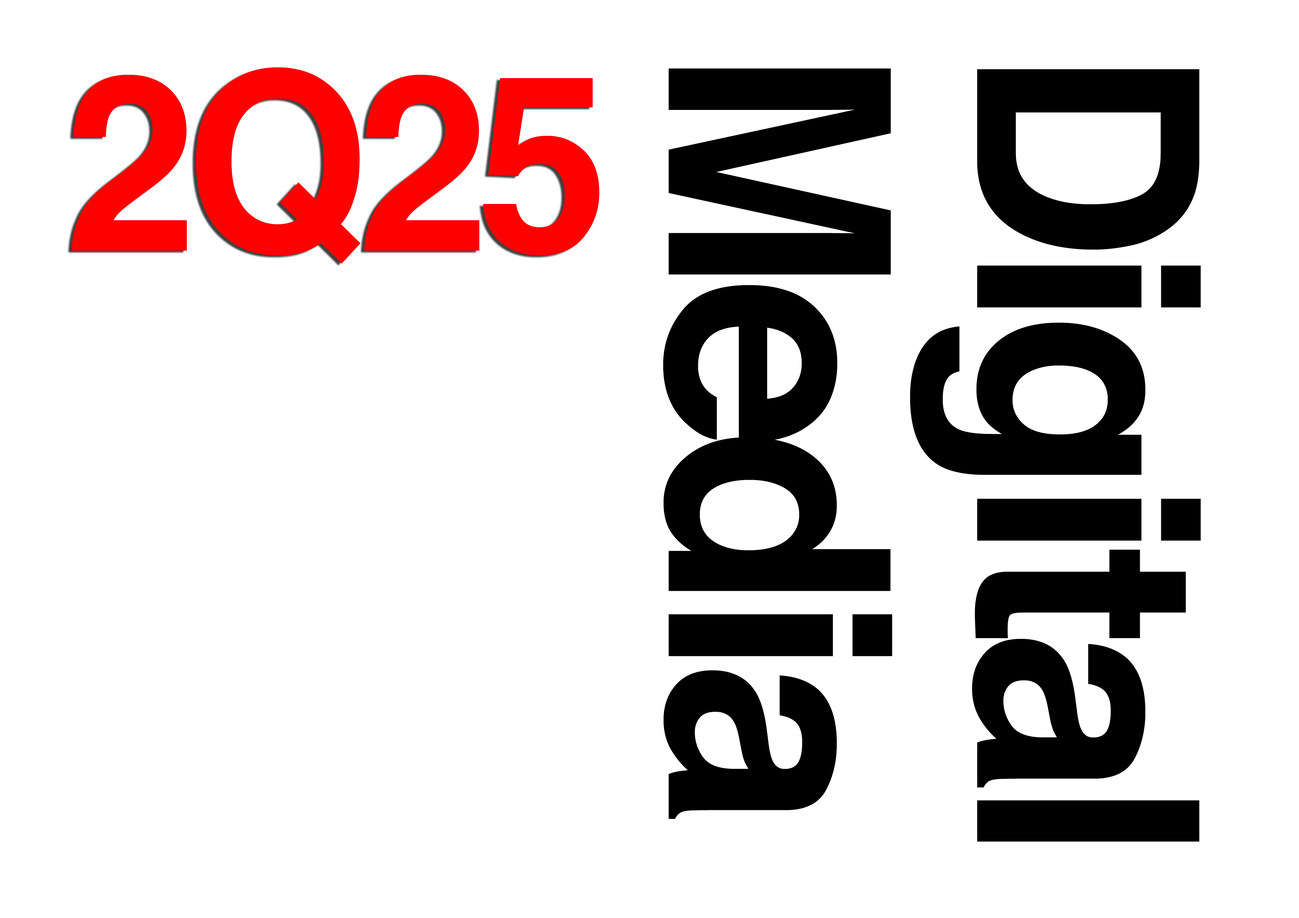
<style>
.page{position:relative;width:1299px;height:918px;background:#ffffff}
.page>*{position:absolute;margin:0}
.t1{font:246.8px "Helvetica-Bold";letter-spacing:-0.05em;color:#ff0000;scale:0.96 1}
.t2{font:308.5px "Helvetica-Bold";letter-spacing:-0.05em;color:#000000;scale:0.96 1}
</style>
<div class="page">
<p class="t1" style="left:71px;top:67px;width:528px;height:197px">2Q25</p>
<p class="t2" style="left:663px;top:68px;width:538px;height:774px;rotate:90deg">DigitalMedia</p>
</div>
